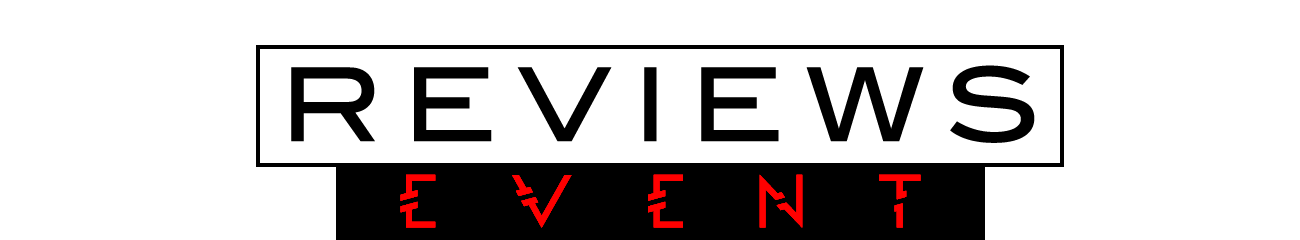
<style>
.page{position:relative;width:1300px;height:240px;background:#ffffff}
.page>*{position:absolute;margin:0}
.t1{font:101.6px "BlairMdITCTTMedium";letter-spacing:0.2em;color:#000000}
.t2{font:70px "Moondance";letter-spacing:1em;color:#ff0000}
</style>
<div class="page">
<p class="t1" style="left:291px;top:65px;width:744px;height:78px">REVIEWS</p>
<p class="t2" style="left:400px;top:174px;width:521px;height:54px">EVENT</p>
</div>
